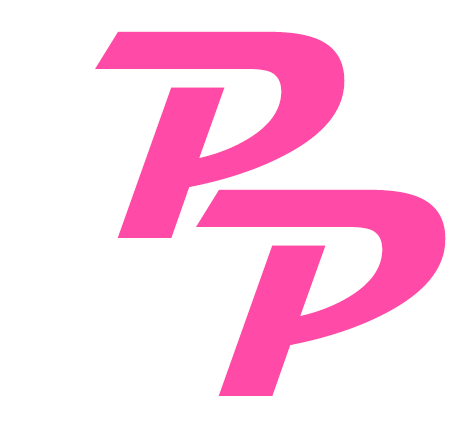
<style>
.page{position:relative;width:472px;height:428px;background:#ffffff}
.page>*{position:absolute;margin:0}
.t1{font:300px "Magneto-Bold";color:#ff4ba7}
</style>
<div class="page">
<p class="t1" style="left:95px;top:31px;width:250px;height:207px">P</p>
<p class="t1" style="left:196px;top:189px;width:250px;height:207px">P</p>
</div>
